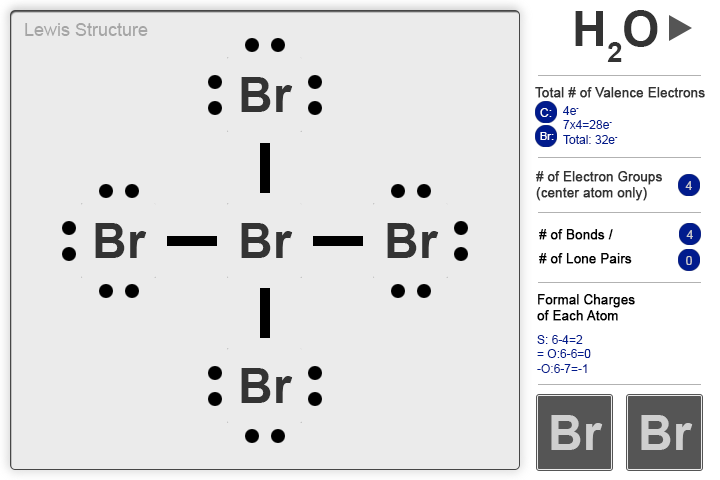
<style>
.page{position:relative;width:720px;height:480px;background:#ebebeb}
.page>*{position:absolute;margin:0}
.t1{font:48px "Arial-BoldMT";color:#333333}
.t2{font:18px "ArialMT";color:#a5a4a4}
.t3{font:13px "ArialMT";color:#333333;font-weight:bold}
.t4{font:12px "ArialMT";color:#ffffff}
.t5{font:12px "ArialMT";color:#021c8d}
.t6{font:11px "ArialMT";color:#ffffff}
.t7{font:12.5px "ArialMT";color:#cfcfcf}
.t8{font:13px/24px "ArialMT";color:#000000;font-weight:bold}
.t9{font:13px "ArialMT";color:#000000;font-weight:bold}
.t10{font:12px "ArialMT";color:#011b8d}
.t11{font:48px "Arial-BoldMT";color:#cfcfcf}
</style>
<div class="page">
<p class="t1" style="left:575px;top:10px;width:83px;height:52px">H2O</p>
<p class="t2" style="left:25px;top:23px;width:123px;height:13px">Lewis Structure</p>
<p class="t1" style="left:241px;top:77px;width:52px;height:35px">Br</p>
<p class="t3" style="left:535px;top:87px;width:170px;height:11px">Total # of Valence Electrons</p>
<p class="t4" style="left:540px;top:108px;width:12px;height:9px">C:</p>
<p class="t5" style="left:563px;top:106px;width:55px;height:38px">4e-<br>7x4=28e-<br>Total: 32e-</p>
<p class="t6" style="left:540px;top:132px;width:14px;height:8px">Br:</p>
<p class="t3" style="left:536px;top:171px;width:126px;height:30px"># of Electron Groups<br>(center atom only)</p>
<p class="t7" style="left:685px;top:181px;width:7px;height:9px">4</p>
<p class="t1" style="left:95px;top:223px;width:52px;height:35px">Br</p>
<p class="t1" style="left:241px;top:223px;width:52px;height:35px">Br</p>
<p class="t1" style="left:387px;top:223px;width:52px;height:35px">Br</p>
<p class="t8" style="left:539px;top:229px;width:93px;height:35px"># of Bonds / <br># of Lone Pairs</p>
<p class="t7" style="left:686px;top:230px;width:7px;height:9px">4</p>
<p class="t7" style="left:686px;top:256px;width:6px;height:9px">0</p>
<p class="t9" style="left:537px;top:294px;width:98px;height:27px">Formal Charges <br>of Each Atom</p>
<p class="t10" style="left:537px;top:335px;width:54px;height:38px">S: 6-4=2<br>= O:6-6=0<br>-O:6-7=-1</p>
<p class="t1" style="left:241px;top:368px;width:52px;height:35px">Br</p>
<p class="t11" style="left:551px;top:415px;width:52px;height:35px">Br</p>
<p class="t11" style="left:641px;top:415px;width:52px;height:35px">Br</p>
</div>
